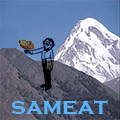
<style>
.page{position:relative;width:120px;height:120px}
.page>*{position:absolute;margin:0}
.t1{font:24px "CopperplateGothic-Bold";color:#5bb2f5}
</style>
<div class="page">
<p class="t1" style="left:11px;top:100px;width:97px;height:15px">sameat</p>
</div>
